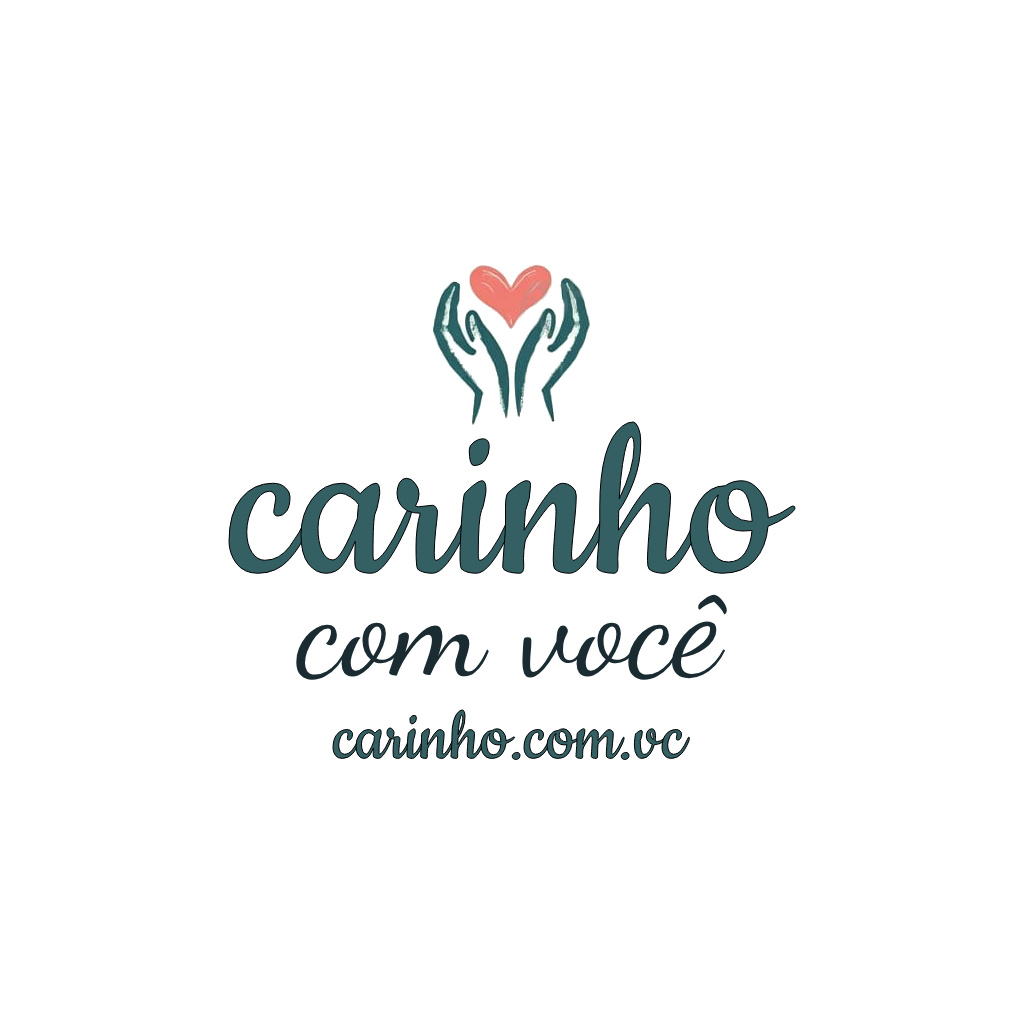
<style>
.page{position:relative;width:1024px;height:1024px;background:#ffffff}
.page>*{position:absolute;margin:0}
.t1{font:250px "Cookie-Regular";color:#346063}
.t2{font:140px "DancingScript-Regular";color:#1a2b32}
.t3{font:80px "Cookie-Regular";color:#346063}
</style>
<div class="page">
<p class="t1" style="left:228px;top:421px;width:568px;height:154px">carinho</p>
<p class="t2" style="left:296px;top:594px;width:431px;height:86px">com você</p>
<p class="t3" style="left:332px;top:709px;width:359px;height:52px">carinho.com.vc</p>
</div>
